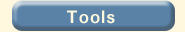
<style>
.page{position:relative;width:185px;height:32px;background:#5982a6}
.page>*{position:absolute;margin:0}
.t1{font:18px "Univers-Bold";letter-spacing:0.05em;color:#fff8de}
</style>
<div class="page">
<p class="t1" style="left:67px;top:10px;width:48px;height:14px">Tools</p>
</div>
